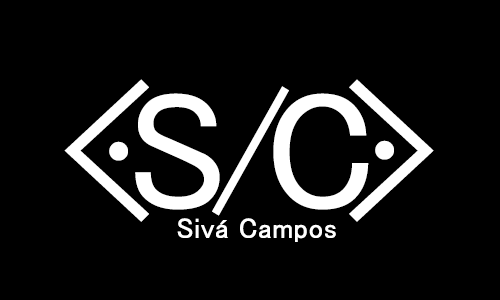
<style>
.page{position:relative;width:500px;height:300px;background:#000000}
.page>*{position:absolute;margin:0}
.t1{font:197.6px "MS-UIGothic";color:#ffffff}
.t2{font:169.3px "MS-UIGothic";color:#ffffff}
.t3{font:169.3px "YuGothicUI-Regular";color:#ffffff}
.t4{font:28.2px "MS-UIGothic";color:#ffffff;font-weight:bold}
</style>
<div class="page">
<p class="t1" style="left:64px;top:79px;width:85px;height:143px">&lt;</p>
<p class="t2" style="left:212px;top:86px;width:77px;height:130px">/</p>
<p class="t1" style="left:349px;top:79px;width:85px;height:143px">&gt;</p>
<p class="t2" style="left:135px;top:93px;width:85px;height:117px">S</p>
<p class="t2" style="left:273px;top:93px;width:96px;height:117px">C</p>
<p class="t3" style="left:109px;top:141px;width:19px;height:20px">.</p>
<p class="t3" style="left:375px;top:140px;width:19px;height:20px">.</p>
<p class="t4" style="left:177px;top:218px;width:159px;height:24px">Sivá Campos</p>
</div>
